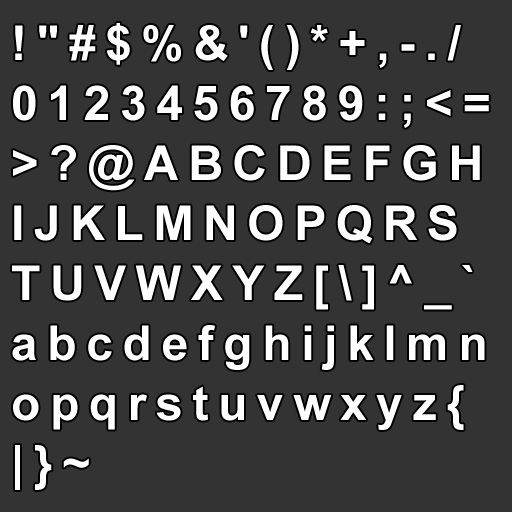
<style>
.page{position:relative;width:512px;height:512px;background:#333333}
.page>*{position:absolute;margin:0}
.t1{font:48px/60px "Arial-BoldMT";letter-spacing:0.2em;color:#ffffff}
</style>
<div class="page">
<p class="t1" style="left:12px;top:23px;width:477px;height:467px">!"#$%&amp;'()*+,-./<br>0123456789:;&lt;=<br>&gt;?@ABCDEFGH<br>IJKLMNOPQRS<br>TUVWXYZ[\]^_`<br>abcdefghijklmn<br>opqrstuvwxyz{<br>|}~</p>
</div>
